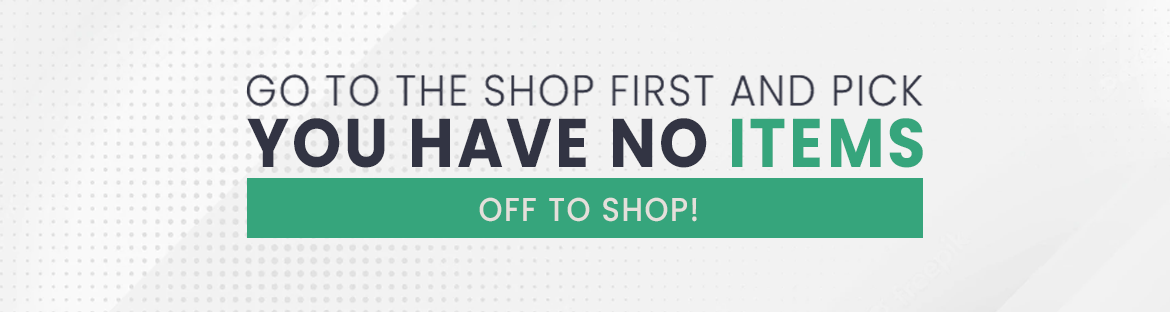
<style>
.page{position:relative;width:1170px;height:312px;background:#f2f2f2}
.page>*{position:absolute;margin:0}
.t1{font:68.6px "Poppins-Bold";letter-spacing:0.05em;color:#323443;scale:0.91 1}
.t2{font:68.6px "Poppins-Bold";letter-spacing:0.05em;color:#36a57c;scale:0.91 1}
.t3{font:33.1px "Poppins-Medium";letter-spacing:0.05em;color:#e4dfdb;scale:0.92 1}
</style>
<div class="page">
<p class="t1" style="left:247px;top:118px;width:676px;height:50px">YOU HAVE NO <span class="t2">ITEMS</span></p>
<p class="t3" style="left:479px;top:197px;width:218px;height:25px">OFF TO SHOP!</p>
</div>
